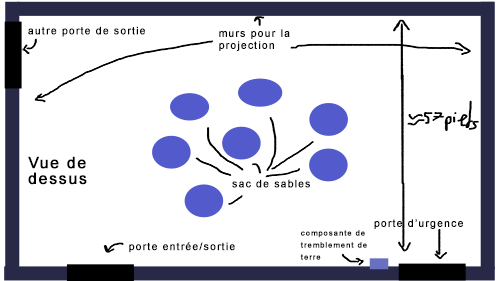
<style>
.page{position:relative;width:500px;height:281px;background:#ffffff}
.page>*{position:absolute;margin:0}
.t1{font:10.4px "ArialMT";letter-spacing:0.09em;color:#000000;font-weight:bold}
.t2{font:10.4px/12px "ArialMT";letter-spacing:0.09em;color:#000000;font-weight:bold}
.t3{font:15.6px/15.6px "ArialMT";letter-spacing:0.09em;color:#000000;font-weight:bold}
.t4{font:7.8px/12px "ArialMT";letter-spacing:0.09em;color:#000000;font-weight:bold}
</style>
<div class="page">
<p class="t1" style="left:28px;top:26px;width:117px;height:11px">autre porte de sortie</p>
<p class="t2" style="left:219px;top:29px;width:71px;height:22px">murs pour la projection</p>
<p class="t3" style="left:28px;top:156px;width:59px;height:29px">Vue de dessus</p>
<p class="t1" style="left:232px;top:179px;width:78px;height:9px">sac de sables</p>
<p class="t1" style="left:374px;top:219px;width:89px;height:10px">porte d’urgence</p>
<p class="t4" style="left:300px;top:230px;width:67px;height:30px">composante de tremblement de terre</p>
<p class="t1" style="left:129px;top:242px;width:106px;height:11px">porte entrée/sortie</p>
</div>
